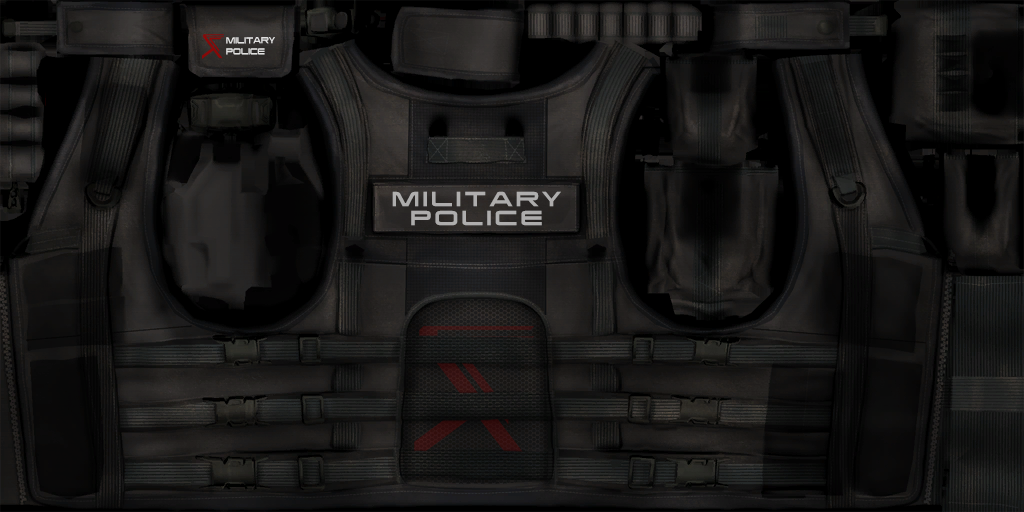
<style>
.page{position:relative;width:1024px;height:512px}
.page>*{position:absolute;margin:0}
.t1{font:7.8px/11px "MassEffect123";color:#e0e0e0;text-transform:uppercase;scale:0.77 1}
.t2{font:18px/19px "MassEffect123";letter-spacing:0.18em;color:#aeadac;font-variant:small-caps}
</style>
<div class="page">
<p class="t1" style="left:226px;top:37px;width:49px;height:18px">Military<br>Police</p>
<p class="t2" style="left:392px;top:191px;width:169px;height:35px;text-align:center">MILITARY POLICE</p>
</div>
